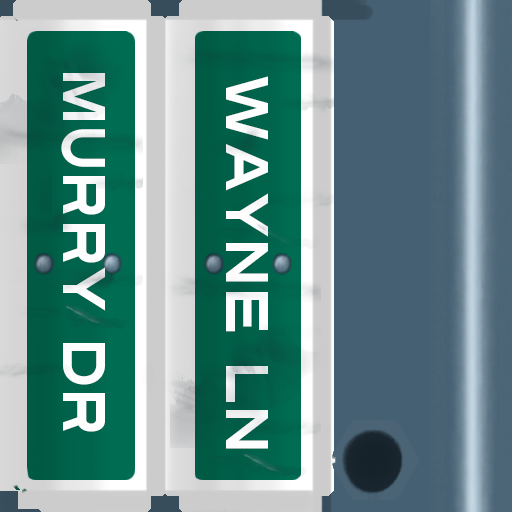
<style>
.page{position:relative;width:512px;height:512px}
.page>*{position:absolute;margin:0}
.t1{font:60px "Turnpike";color:#fefeff;scale:0.75 1}
</style>
<div class="page">
<p class="t1" style="left:61px;top:73px;width:44px;height:359px;rotate:90deg">Murry Dr</p>
<p class="t1" style="left:226px;top:76px;width:42px;height:373px;rotate:90deg">Wayne Ln</p>
</div>
